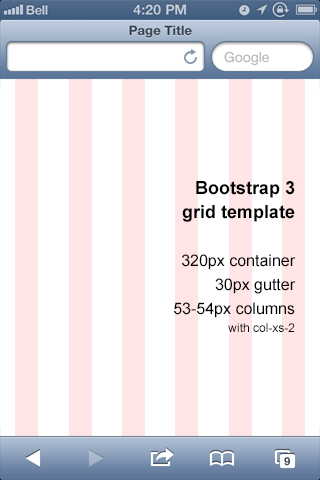
<style>
.page{position:relative;width:320px;height:480px;background:#ffffff}
.page>*{position:absolute;margin:0}
.t1{font:16px/24px "ArialMT";color:#000000}
.t2{font:18px/24px "Arial-BoldMT";color:#000000}
.t3{font:12px/18px "ArialMT";color:#000000}
</style>
<div class="page">
<p class="t1" style="left:174px;top:181px;width:122px;height:151px;text-align:right"><span class="t2">Bootstrap 3<br>grid template<br><br></span>320px container<br>30px gutter<br>53-54px columns<br><span class="t3">with col-xs-2</span></p>
</div>
